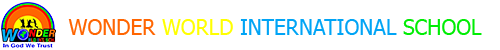
<style>
.page{position:relative;width:500px;height:50px;background:#ffffff}
.page>*{position:absolute;margin:0}
.t1{font:21px "Tahoma";color:#00a4f5}
.t2{font:21px "Tahoma";color:#ff6501}
.t3{font:21px "Tahoma";color:#ffff00}
.t4{font:21px "Tahoma";color:#00ed04}
</style>
<div class="page">
<p class="t1" style="left:68px;top:19px;width:414px;height:16px"><span class="t2">WONDER </span><span class="t3">WORLD </span>INTERNATIONAL <span class="t4">SCHOOL</span></p>
</div>
